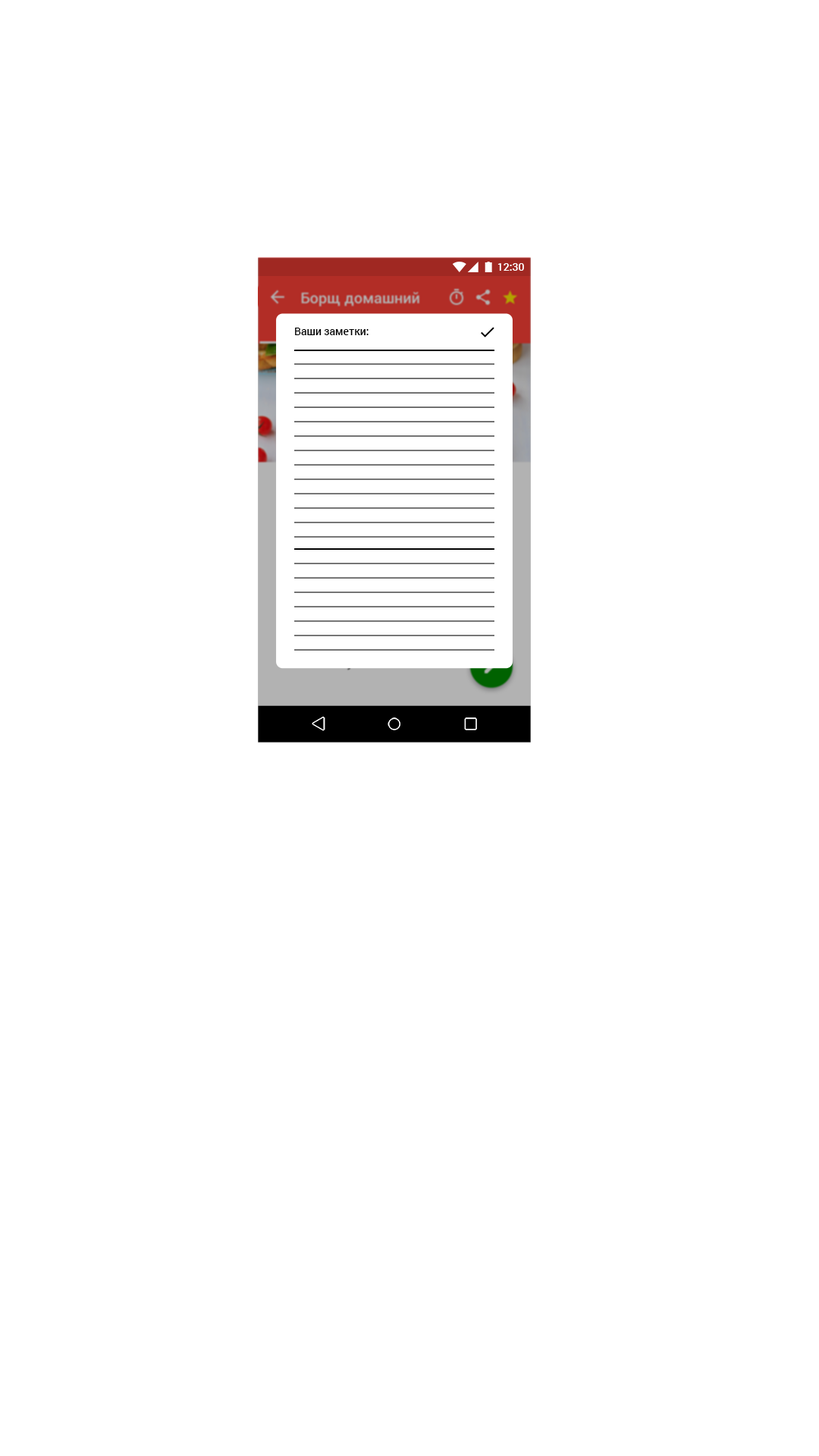
<style>
.page{position:relative;width:819px;height:1456px;background:#ffffff}
.page>*{position:absolute;margin:0}
.t1{font:10.6px "Roboto-Medium";color:#ffffff}
.t2{font:10.6px "Roboto-Medium";color:#000000}
</style>
<div class="page">
<p class="t1" style="left:497px;top:263px;width:27px;height:8px">12:30</p>
<p class="t2" style="left:295px;top:328px;width:74px;height:7px">Ваши заметки:</p>
</div>
